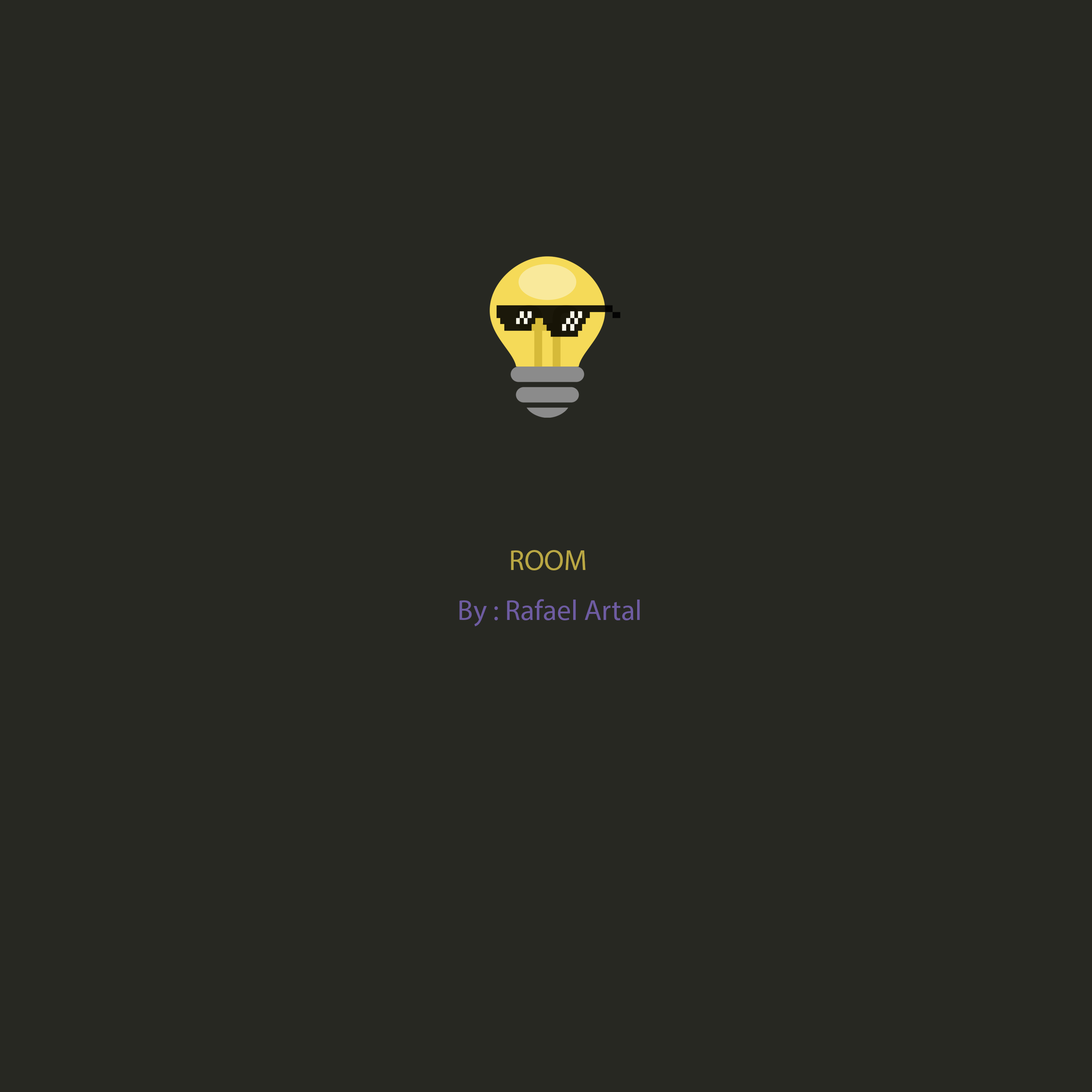
<style>
.page{position:relative;width:1092px;height:1092px;background:#272822}
.page>*{position:absolute;margin:0}
.t1{font:28.8px "MyriadPro-Regular";color:#baa844}
.t2{font:28.8px "MyriadPro-Regular";color:#6f5ca2}
</style>
<div class="page">
<p class="t1" style="left:511px;top:550px;width:75px;height:20px">ROOM</p>
<p class="t2" style="left:459px;top:599px;width:181px;height:27px">By : Rafael Artal</p>
</div>
